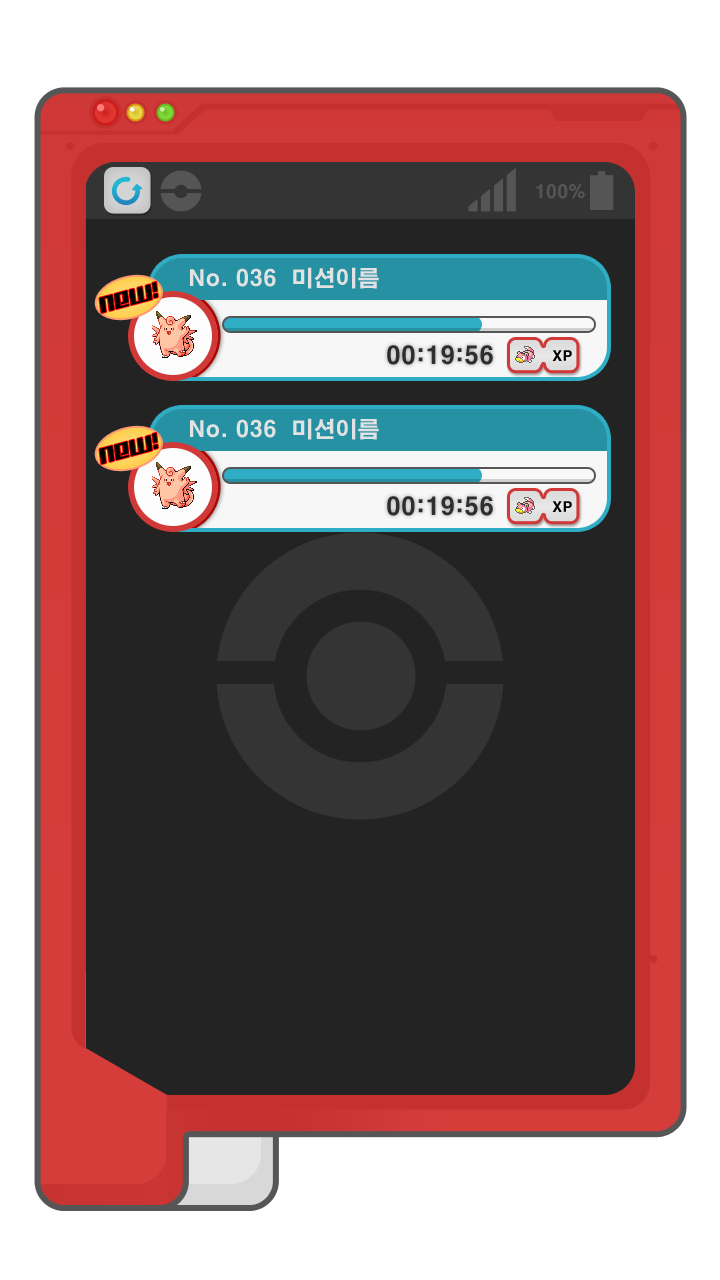
<style>
.page{position:relative;width:720px;height:1280px;background:#232323}
.page>*{position:absolute;margin:0}
.t1{font:18px "H2gtrE";color:#555555}
.t2{font:22px "H2gtrE";color:#e2e2e2}
.t3{font:22px "Kitchenpolice";color:#000000}
.t4{font:24px "H2gtrE";color:#2e2e2e}
.t5{font:14px "H2gtrE";color:#000000}
</style>
<div class="page">
<p class="t1" style="left:536px;top:183px;width:49px;height:16px">100%</p>
<p class="t2" style="left:190px;top:267px;width:189px;height:22px">No. 036  미션이름</p>
<p class="t3" style="left:99px;top:281px;width:59px;height:33px;rotate:-15deg">NEW!</p>
<p class="t4" style="left:387px;top:345px;width:106px;height:20px">00:19:56</p>
<p class="t5" style="left:552px;top:350px;width:20px;height:11px">XP</p>
</div>
